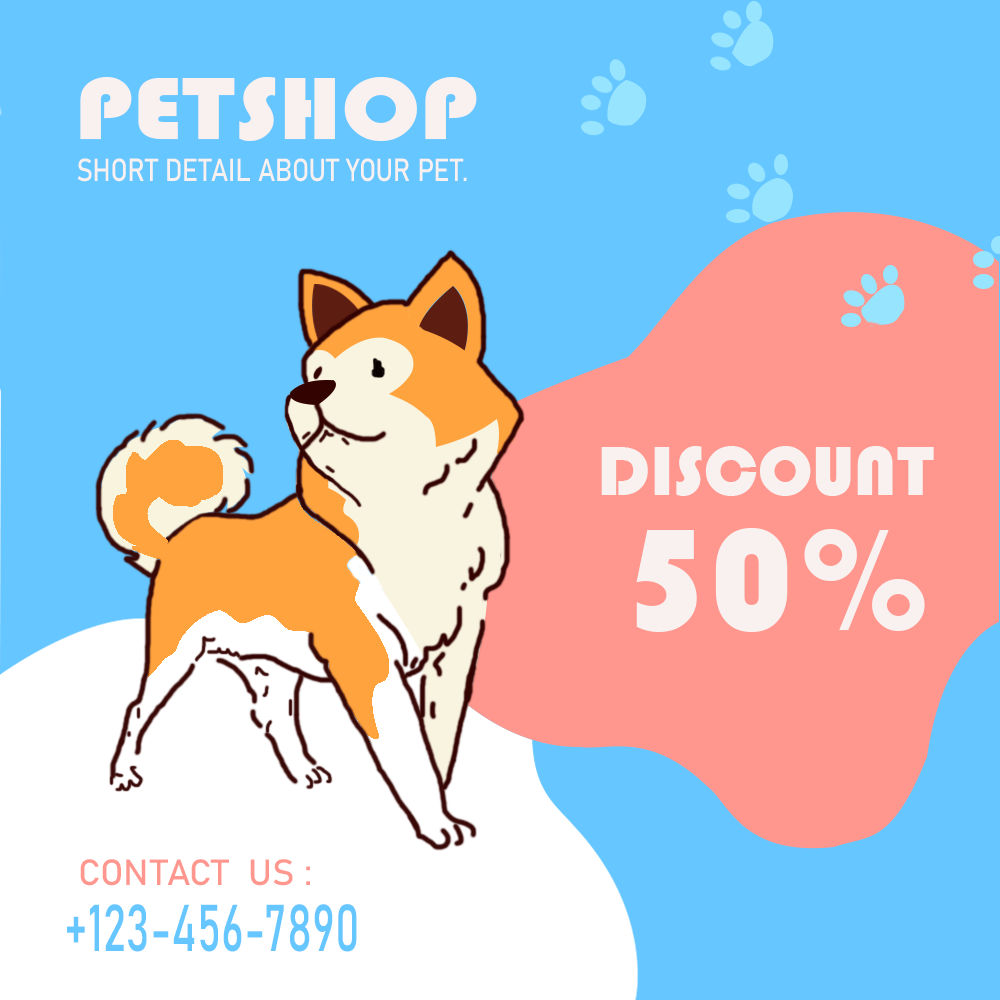
<style>
.page{position:relative;width:1000px;height:1000px;background:#66c6ff}
.page>*{position:absolute;margin:0}
.t1{font:91px "Bauhaus93";color:#f8f1f0;scale:1.14 1}
.t2{font:31.4px "Bahnschrift";color:#f8f1f0;scale:0.85 1}
.t3{font:72px "Bauhaus93";color:#f8f1f0}
.t4{font:150px "Bauhaus93";color:#f8f1f0}
.t5{font:36px "Bahnschrift";color:#ff978e}
.t6{font:65.3px "Bahnschrift";color:#66c6ff;scale:0.69 1}
</style>
<div class="page">
<p class="t1" style="left:80px;top:77px;width:397px;height:64px">PETSHOP</p>
<p class="t2" style="left:77px;top:158px;width:390px;height:24px">SHORT DETAIL ABOUT YOUR PET.</p>
<p class="t3" style="left:601px;top:446px;width:333px;height:50px">DISCOUNT</p>
<p class="t4" style="left:636px;top:528px;width:289px;height:104px">50%</p>
<p class="t5" style="left:80px;top:859px;width:230px;height:27px">CONTACT  US :</p>
<p class="t6" style="left:67px;top:904px;width:290px;height:48px">+123-456-7890</p>
</div>
